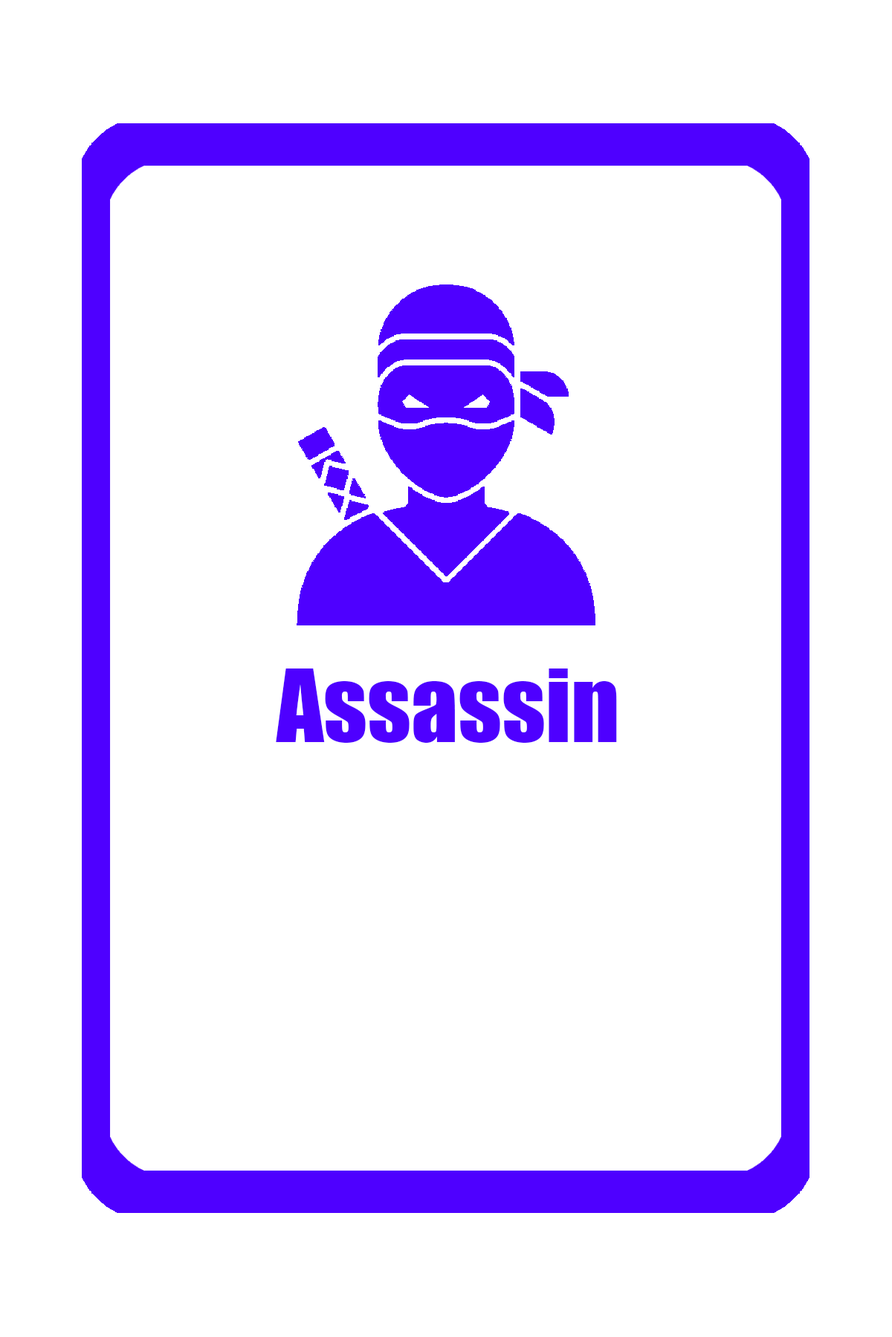
<style>
.page{position:relative;width:892px;height:1337px;background:#ffffff}
.page>*{position:absolute;margin:0}
.t1{font:92.9px "Impact";color:#4e00ff}
</style>
<div class="page">
<p class="t1" style="left:276px;top:669px;width:341px;height:74px">Assassin</p>
</div>
